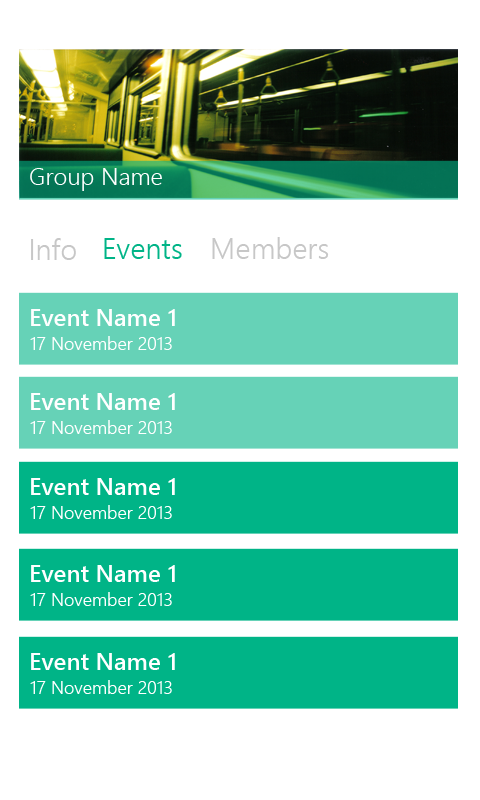
<style>
.page{position:relative;width:480px;height:800px;background:#ffffff}
.page>*{position:absolute;margin:0}
.t1{font:24px "SegoeUI-Semilight";color:#ffffff}
.t2{font:29.4px "SegoeUI-Semilight";color:#c7c7c7}
.t3{font:29.4px "SegoeUI-Semilight";color:#00b487}
.t4{font:24px "SegoeUI-Semibold";color:#ffffff}
.t5{font:18px "SegoeUI-Semilight";color:#ffffff}
</style>
<div class="page">
<p class="t1" style="left:30px;top:168px;width:132px;height:23px">Group Name</p>
<p class="t2" style="left:31px;top:238px;width:45px;height:22px">Info</p>
<p class="t3" style="left:104px;top:238px;width:78px;height:21px">Events</p>
<p class="t2" style="left:212px;top:237px;width:117px;height:22px">Members</p>
<p class="t4" style="left:31px;top:309px;width:144px;height:17px">Event Name 1</p>
<p class="t5" style="left:30px;top:336px;width:142px;height:14px">17 November 2013</p>
<p class="t4" style="left:31px;top:393px;width:144px;height:17px">Event Name 1</p>
<p class="t5" style="left:30px;top:420px;width:142px;height:14px">17 November 2013</p>
<p class="t4" style="left:31px;top:478px;width:144px;height:17px">Event Name 1</p>
<p class="t5" style="left:30px;top:505px;width:142px;height:14px">17 November 2013</p>
<p class="t4" style="left:31px;top:565px;width:144px;height:17px">Event Name 1</p>
<p class="t5" style="left:30px;top:592px;width:142px;height:14px">17 November 2013</p>
<p class="t4" style="left:31px;top:653px;width:144px;height:17px">Event Name 1</p>
<p class="t5" style="left:30px;top:680px;width:142px;height:14px">17 November 2013</p>
</div>
